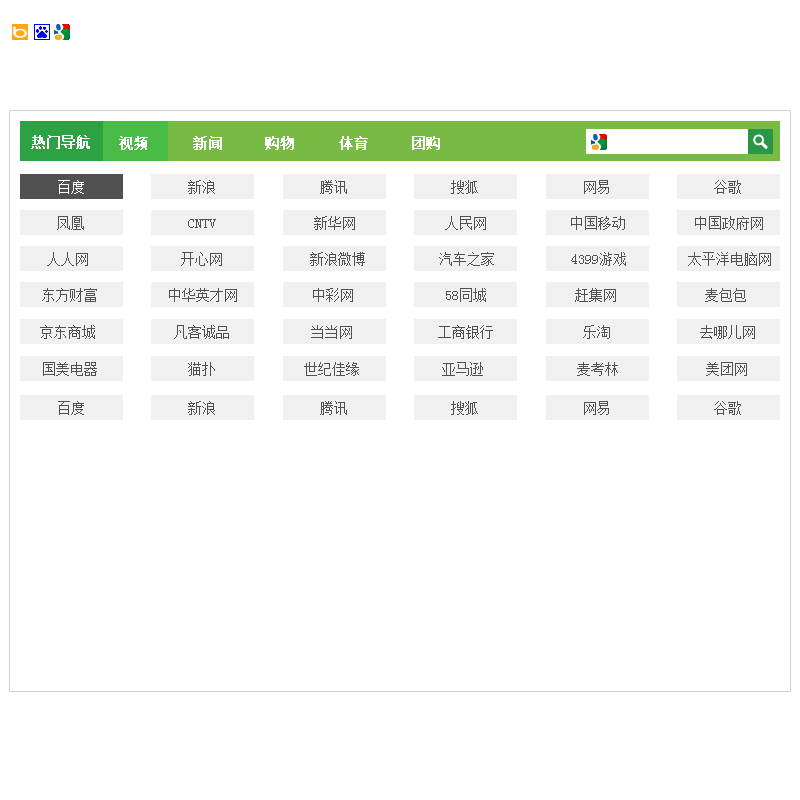
<style>
.page{position:relative;width:800px;height:800px;background:#ffffff}
.page>*{position:absolute;margin:0}
.t1{font:14px "SimSun";color:#ffffff;font-weight:bold}
.t2{font:14px "SimSun";color:#ffffff}
.t3{font:14px "SimSun";color:#505050}
</style>
<div class="page">
<p class="t1" style="left:31px;top:135px;width:59px;height:14px">热门导航</p>
<p class="t1" style="left:119px;top:136px;width:29px;height:14px">视频</p>
<p class="t1" style="left:193px;top:136px;width:29px;height:14px">新闻</p>
<p class="t1" style="left:265px;top:136px;width:29px;height:14px">购物</p>
<p class="t1" style="left:339px;top:136px;width:29px;height:14px">体育</p>
<p class="t1" style="left:412px;top:136px;width:28px;height:14px">团购</p>
<p class="t2" style="left:58px;top:180px;width:26px;height:14px">百度</p>
<p class="t3" style="left:188px;top:180px;width:27px;height:14px">新浪</p>
<p class="t3" style="left:320px;top:180px;width:27px;height:14px">腾讯</p>
<p class="t3" style="left:451px;top:180px;width:27px;height:14px">搜狐</p>
<p class="t3" style="left:584px;top:180px;width:25px;height:14px">网易</p>
<p class="t3" style="left:714px;top:180px;width:27px;height:14px">谷歌</p>
<p class="t3" style="left:57px;top:216px;width:27px;height:14px">凤凰</p>
<p class="t3" style="left:188px;top:219px;width:28px;height:9px">CNTV</p>
<p class="t3" style="left:314px;top:216px;width:41px;height:14px">新华网</p>
<p class="t3" style="left:445px;top:216px;width:41px;height:14px">人民网</p>
<p class="t3" style="left:571px;top:216px;width:54px;height:14px">中国移动</p>
<p class="t3" style="left:695px;top:216px;width:68px;height:14px">中国政府网</p>
<p class="t3" style="left:47px;top:252px;width:41px;height:14px">人人网</p>
<p class="t3" style="left:181px;top:252px;width:41px;height:14px">开心网</p>
<p class="t3" style="left:310px;top:252px;width:55px;height:14px">新浪微博</p>
<p class="t3" style="left:439px;top:252px;width:55px;height:14px">汽车之家</p>
<p class="t3" style="left:571px;top:252px;width:55px;height:14px">4399游戏</p>
<p class="t3" style="left:688px;top:252px;width:83px;height:14px">太平洋电脑网</p>
<p class="t3" style="left:42px;top:288px;width:55px;height:14px">东方财富</p>
<p class="t3" style="left:169px;top:288px;width:68px;height:14px">中华英才网</p>
<p class="t3" style="left:313px;top:288px;width:40px;height:14px">中彩网</p>
<p class="t3" style="left:446px;top:288px;width:40px;height:14px">58同城</p>
<p class="t3" style="left:575px;top:288px;width:41px;height:14px">赶集网</p>
<p class="t3" style="left:705px;top:288px;width:41px;height:14px">麦包包</p>
<p class="t3" style="left:40px;top:325px;width:55px;height:14px">京东商城</p>
<p class="t3" style="left:174px;top:325px;width:55px;height:14px">凡客诚品</p>
<p class="t3" style="left:311px;top:325px;width:41px;height:14px">当当网</p>
<p class="t3" style="left:438px;top:325px;width:55px;height:14px">工商银行</p>
<p class="t3" style="left:583px;top:325px;width:27px;height:14px">乐淘</p>
<p class="t3" style="left:700px;top:325px;width:55px;height:14px">去哪儿网</p>
<p class="t3" style="left:43px;top:362px;width:54px;height:14px">国美电器</p>
<p class="t3" style="left:188px;top:362px;width:27px;height:14px">猫扑</p>
<p class="t3" style="left:304px;top:362px;width:55px;height:14px">世纪佳缘</p>
<p class="t3" style="left:442px;top:362px;width:41px;height:14px">亚马逊</p>
<p class="t3" style="left:577px;top:362px;width:41px;height:14px">麦考林</p>
<p class="t3" style="left:706px;top:362px;width:41px;height:14px">美团网</p>
<p class="t3" style="left:58px;top:401px;width:26px;height:14px">百度</p>
<p class="t3" style="left:188px;top:401px;width:27px;height:14px">新浪</p>
<p class="t3" style="left:320px;top:401px;width:27px;height:14px">腾讯</p>
<p class="t3" style="left:451px;top:401px;width:27px;height:14px">搜狐</p>
<p class="t3" style="left:584px;top:401px;width:25px;height:14px">网易</p>
<p class="t3" style="left:714px;top:401px;width:27px;height:14px">谷歌</p>
</div>
